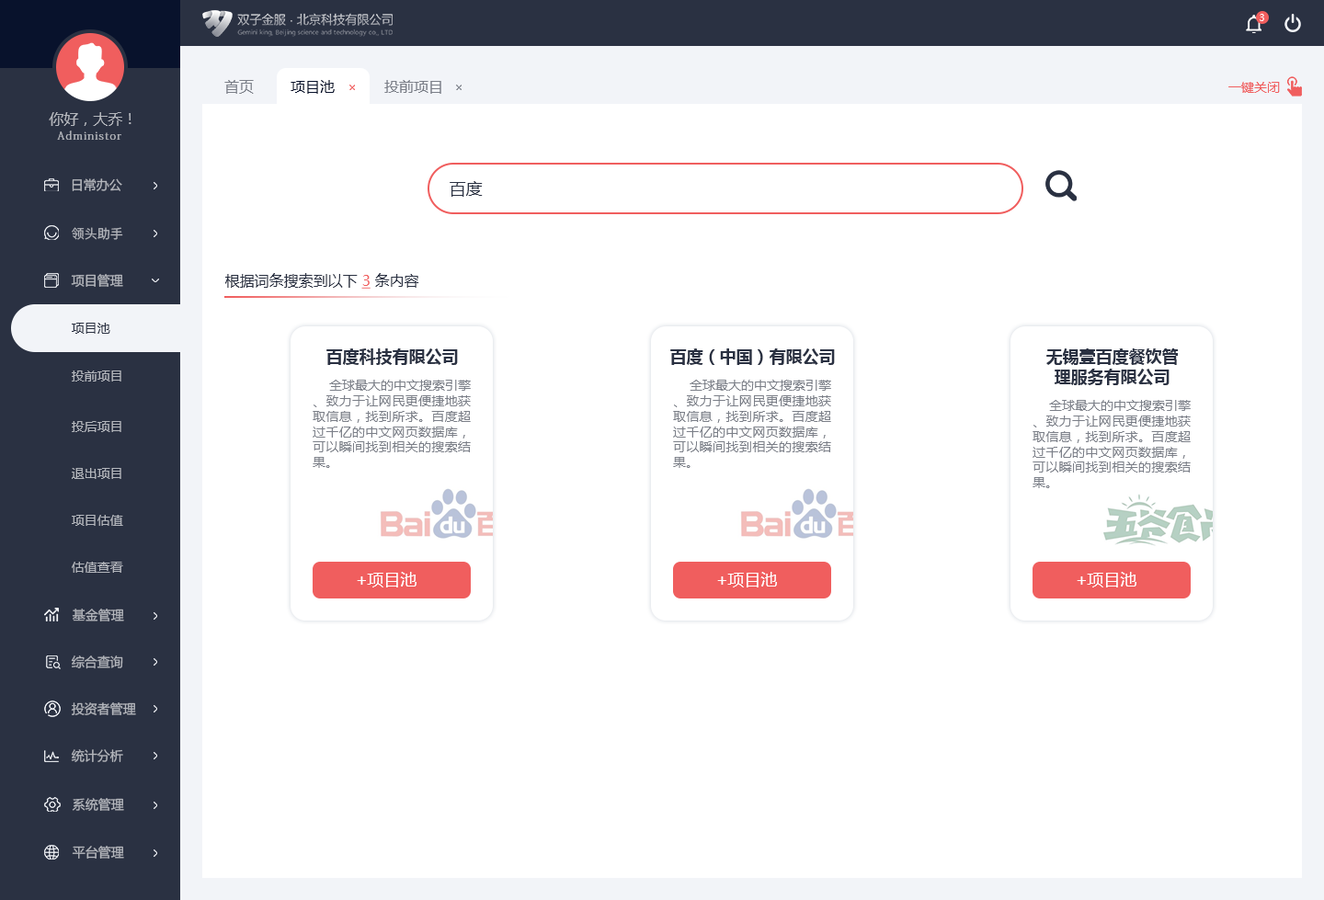
<style>
.page{position:relative;width:1324px;height:900px;background:#ffffff}
.page>*{position:absolute;margin:0}
.t1{font:9.2px "MicrosoftYaHeiUI";color:#ffffff}
.t2{font:14.7px "MicrosoftYaHeiMono";color:#7b7f88}
.t3{font:14.7px "MicrosoftYaHeiMono";color:#08122c}
.t4{font:12.9px "MicrosoftYaHeiMono";color:#f05e5e}
.t5{font:14.7px "MicrosoftYaHeiMono";color:#b4b7bd}
.t6{font:11px "AdobeFangsongStd-Regular";letter-spacing:0.1em;color:#b4b7bd}
.t7{font:12.9px "MicrosoftYaHeiUI";color:#b4b7bd}
.t8{font:16.6px "MicrosoftYaHeiUI";color:#2a3142}
.t9{font:12.9px "PingFang-SC-Medium";color:#b4b7bd}
.t10{font:14.7px "MicrosoftYaHeiUI";color:#2a3142}
.t11{font:14.7px "MicrosoftYaHeiUI";color:#f05e5e;text-decoration:underline}
.t12{font:12.9px "MicrosoftYaHeiUI";color:#2a3142}
.t13{font:16.6px "MicrosoftYaHeiUI-Bold";color:#2a3142}
.t14{font:12.9px "MicrosoftYaHeiUI";color:#7b7f88}
.t15{font:16.6px "MicrosoftYaHeiUI";color:#ffffff}
</style>
<div class="page">
<p class="t1" style="left:1260px;top:14px;width:5px;height:7px">3</p>
<p class="t2" style="left:224px;top:80px;width:30px;height:14px">首页</p>
<p class="t3" style="left:291px;top:80px;width:44px;height:14px">项目池</p>
<p class="t2" style="left:384px;top:80px;width:57px;height:14px">投前项目</p>
<p class="t4" style="left:1229px;top:82px;width:51px;height:11px">一键关闭</p>
<p class="t5" style="left:49px;top:112px;width:83px;height:14px">你好，大乔！</p>
<p class="t6" style="left:57px;top:131px;width:64px;height:9px">Administor</p>
<p class="t7" style="left:72px;top:178px;width:50px;height:13px">日常办公</p>
<p class="t8" style="left:450px;top:181px;width:33px;height:16px">百度</p>
<p class="t9" style="left:72px;top:227px;width:51px;height:13px">领头助手</p>
<p class="t7" style="left:71px;top:274px;width:52px;height:14px">项目管理</p>
<p class="t10" style="left:225px;top:273px;width:194px;height:16px">根据词条搜索到以下 <span class="t11">3 </span>条内容</p>
<p class="t12" style="left:72px;top:323px;width:38px;height:11px">项目池</p>
<p class="t13" style="left:326px;top:349px;width:132px;height:16px">百度科技有限公司</p>
<p class="t13" style="left:670px;top:349px;width:165px;height:16px">百度（中国）有限公司</p>
<p class="t13" style="left:1047px;top:349px;width:131px;height:36px;text-align:center">无锡壹百度餐饮管<br>理服务有限公司</p>
<p class="t7" style="left:72px;top:371px;width:49px;height:11px">投前项目</p>
<p class="t14" style="left:313px;top:380px;width:158px;height:88px;text-align:justify">全球最大的中文搜索引擎、致力于让网民更便捷地获取信息，找到所求。百度超过千亿的中文网页数据库，可以瞬间找到相关的搜索结果。</p>
<p class="t14" style="left:673px;top:380px;width:158px;height:88px;text-align:justify">全球最大的中文搜索引擎、致力于让网民更便捷地获取信息，找到所求。百度超过千亿的中文网页数据库，可以瞬间找到相关的搜索结果。</p>
<p class="t14" style="left:1033px;top:400px;width:158px;height:88px;text-align:justify">全球最大的中文搜索引擎、致力于让网民更便捷地获取信息，找到所求。百度超过千亿的中文网页数据库，可以瞬间找到相关的搜索结果。</p>
<p class="t7" style="left:72px;top:421px;width:49px;height:11px">投后项目</p>
<p class="t7" style="left:72px;top:468px;width:49px;height:11px">退出项目</p>
<p class="t7" style="left:72px;top:515px;width:51px;height:11px">项目估值</p>
<p class="t7" style="left:72px;top:562px;width:51px;height:11px">估值查看</p>
<p class="t15" style="left:357px;top:572px;width:60px;height:16px">+项目池</p>
<p class="t15" style="left:717px;top:572px;width:60px;height:16px">+项目池</p>
<p class="t15" style="left:1077px;top:572px;width:60px;height:16px">+项目池</p>
<p class="t7" style="left:72px;top:609px;width:52px;height:13px">基金管理</p>
<p class="t7" style="left:71px;top:656px;width:52px;height:14px">综合查询</p>
<p class="t7" style="left:71px;top:703px;width:65px;height:13px">投资者管理</p>
<p class="t7" style="left:71px;top:750px;width:52px;height:12px">统计分析</p>
<p class="t7" style="left:72px;top:798px;width:52px;height:13px">系统管理</p>
<p class="t7" style="left:72px;top:846px;width:52px;height:13px">平台管理</p>
</div>
